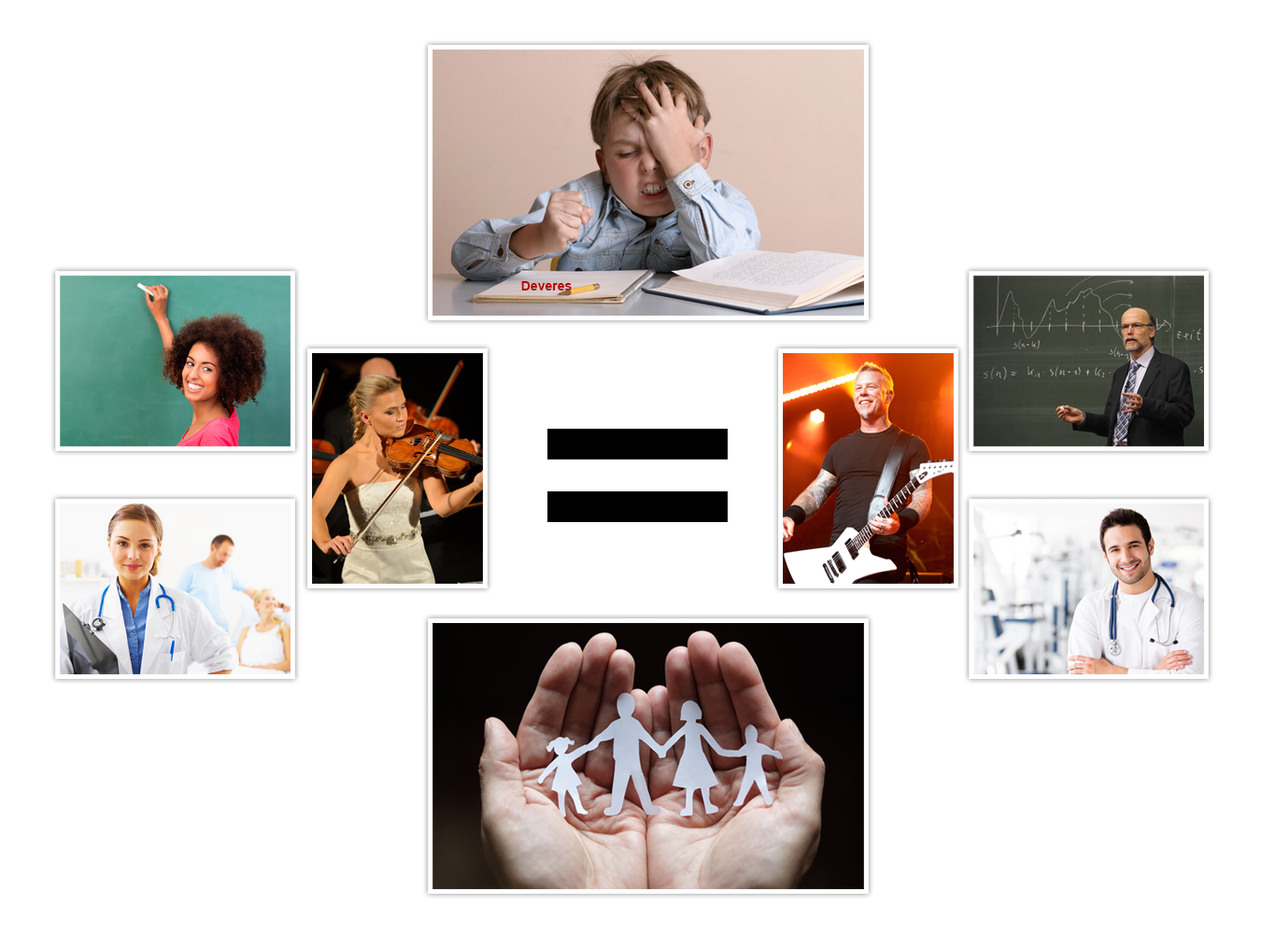
<style>
.page{position:relative;width:1276px;height:934px;background:#ffffff}
.page>*{position:absolute;margin:0}
.t1{font:13.1px "Arial-BoldMT";color:#af0800}
</style>
<div class="page">
<p class="t1" style="left:521px;top:281px;width:51px;height:10px">Deveres</p>
</div>
